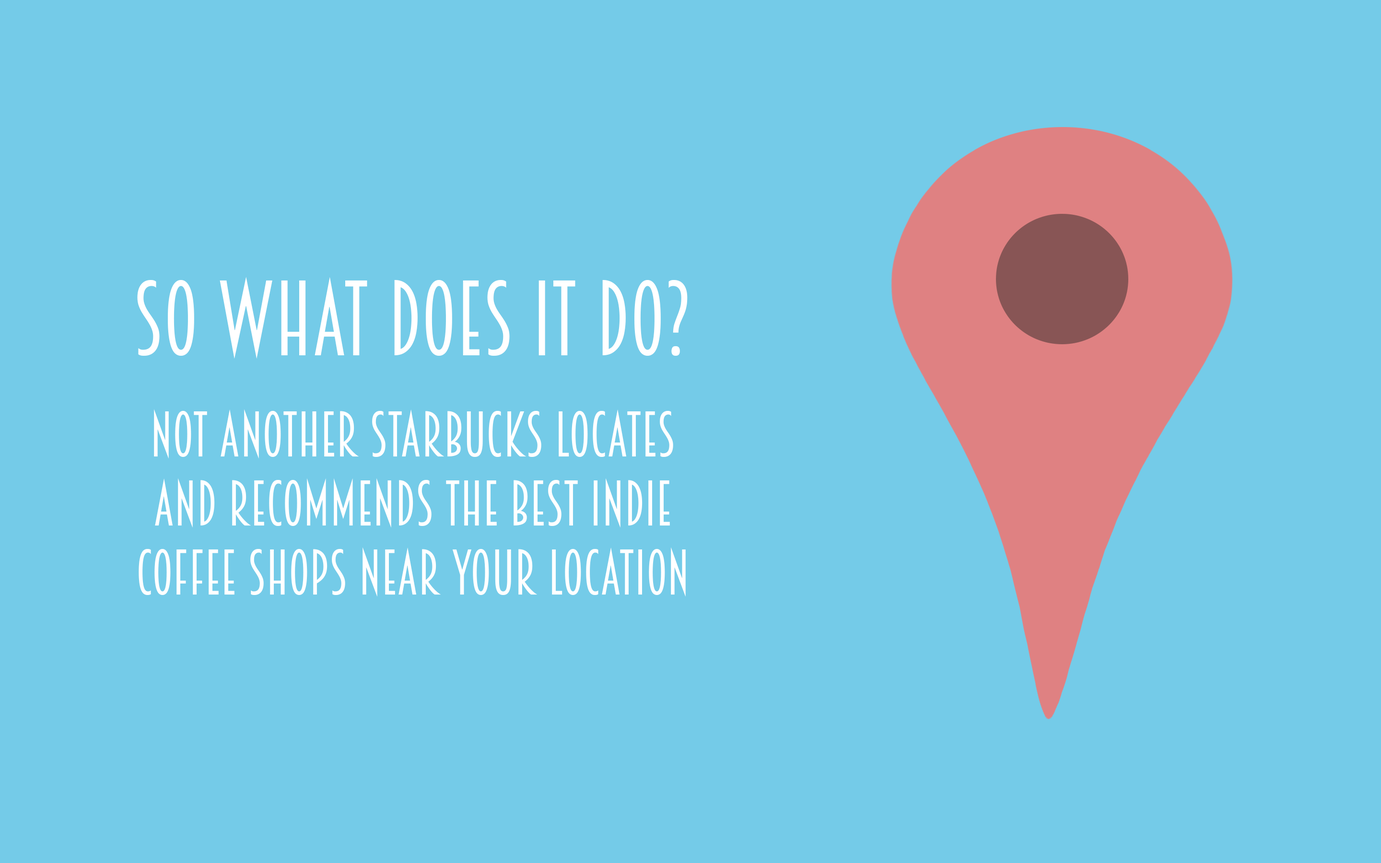
<style>
.page{position:relative;width:1381px;height:863px;background:#74cbe8}
.page>*{position:absolute;margin:0}
.t1{font:95.9px "Breamcatcher-Regular";color:#ffffff}
.t2{font:57.6px "Breamcatcher-Regular";color:#ffffff}
</style>
<div class="page">
<p class="t1" style="left:137px;top:277px;width:551px;height:82px">So what does it do?</p>
<p class="t2" style="left:139px;top:409px;width:547px;height:188px;text-align:center">not another starbucks locates<br>and recommends the best indie<br>coffee shops near your location</p>
</div>
